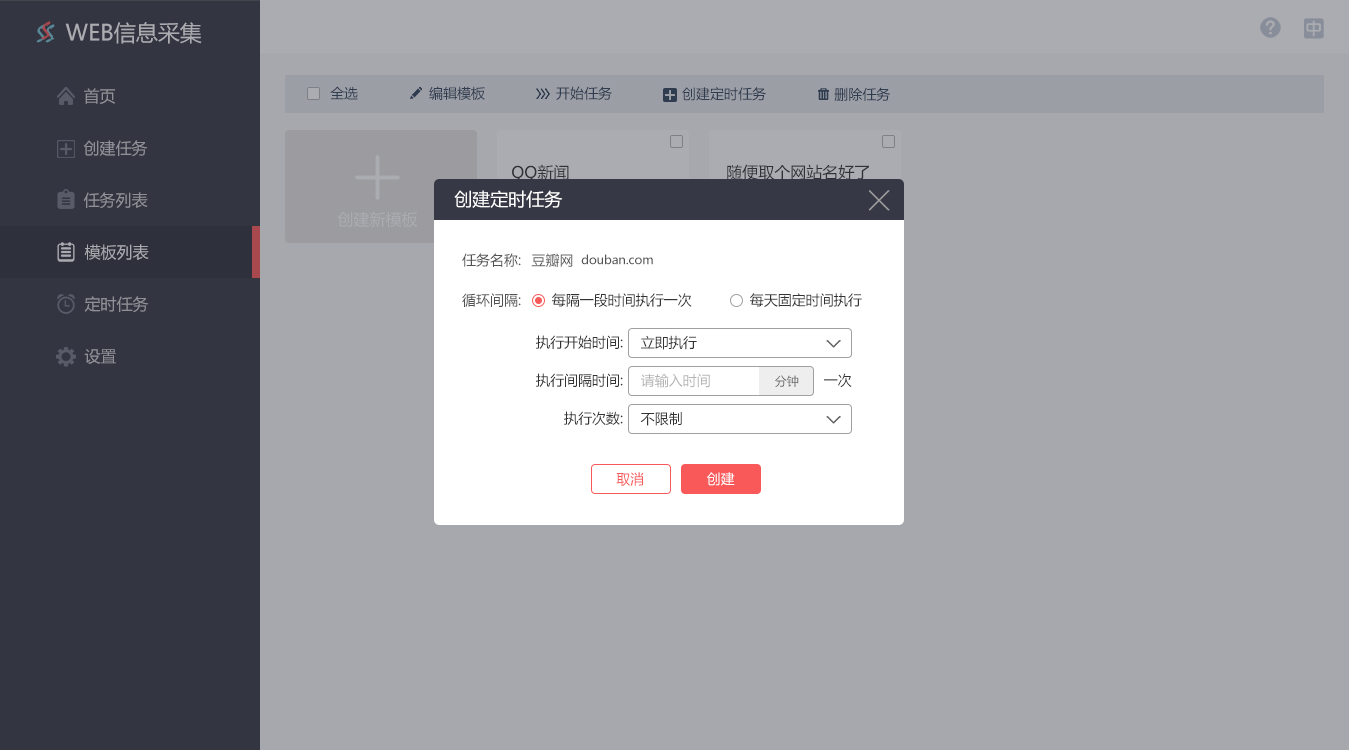
<style>
.page{position:relative;width:1349px;height:750px;background:#a7a8ad}
.page>*{position:absolute;margin:0}
.t1{font:18px "MicrosoftYaHei";color:#ffffff}
.t2{font:14px "MicrosoftYaHei";color:#535353}
.t3{font:12px "MicrosoftYaHei";color:#535353}
.t4{font:14px "MicrosoftYaHei";color:#333333}
.t5{font:14px "MicrosoftYaHei";color:#b5b5b5}
.t6{font:12px "MicrosoftYaHei";color:#666666}
.t7{font:14px "MicrosoftYaHei";color:#f95959}
.t8{font:14px "MicrosoftYaHei";color:#ffffff}
</style>
<div class="page">
<p class="t1" style="left:454px;top:190px;width:109px;height:18px">创建定时任务</p>
<p class="t2" style="left:462px;top:253px;width:59px;height:14px">任务名称:</p>
<p class="t2" style="left:531px;top:253px;width:42px;height:15px">豆瓣网</p>
<p class="t3" style="left:581px;top:254px;width:72px;height:11px">douban.com</p>
<p class="t2" style="left:462px;top:293px;width:59px;height:14px">循环间隔:</p>
<p class="t4" style="left:552px;top:293px;width:140px;height:14px">每隔一段时间执行一次</p>
<p class="t4" style="left:750px;top:293px;width:112px;height:14px">每天固定时间执行</p>
<p class="t4" style="left:536px;top:335px;width:87px;height:14px">执行开始时间:</p>
<p class="t4" style="left:641px;top:335px;width:56px;height:15px">立即执行</p>
<p class="t4" style="left:536px;top:373px;width:87px;height:14px">执行间隔时间:</p>
<p class="t5" style="left:641px;top:373px;width:69px;height:15px">请输入时间</p>
<p class="t6" style="left:775px;top:375px;width:24px;height:12px">分钟</p>
<p class="t4" style="left:824px;top:373px;width:28px;height:15px">一次</p>
<p class="t4" style="left:564px;top:411px;width:59px;height:15px">执行次数:</p>
<p class="t4" style="left:640px;top:412px;width:42px;height:14px">不限制</p>
<p class="t7" style="left:616px;top:472px;width:28px;height:14px">取消</p>
<p class="t8" style="left:707px;top:472px;width:28px;height:14px">创建</p>
</div>
